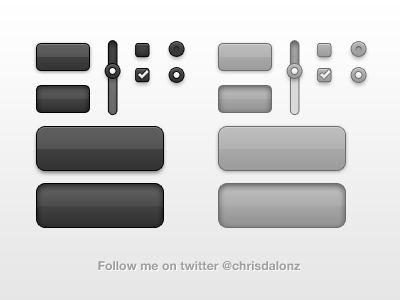
<style>
.page{position:relative;width:400px;height:300px}
.page>*{position:absolute;margin:0}
.t1{font:12.2px "HelveticaNeue-Bold";letter-spacing:0.01em;color:#9e9e9e}
</style>
<div class="page">
<p class="t1" style="left:98px;top:261px;width:202px;height:10px">Follow me on twitter @chrisdalonz</p>
</div>
